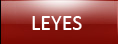
<style>
.page{position:relative;width:118px;height:44px}
.page>*{position:absolute;margin:0}
.t1{font:22px "Calibri";color:#ffffff}
</style>
<div class="page">
<p class="t1" style="left:32px;top:16px;width:50px;height:14px">LEYES</p>
</div>
